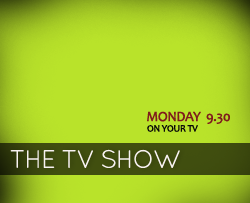
<style>
.page{position:relative;width:250px;height:203px;background:#b9e32a}
.page>*{position:absolute;margin:0}
.t1{font:14px "Candara";letter-spacing:-0.05em;color:#7f1b1b;font-weight:bold}
.t2{font:9.8px "Candara";letter-spacing:-0.05em;color:#090808;text-transform:uppercase;font-weight:bold}
.t3{font:25.3px "QuicksandBook-Regular";letter-spacing:-0.05em;color:#f8f2f2;text-transform:uppercase}
</style>
<div class="page">
<p class="t1" style="left:147px;top:111px;width:83px;height:13px">MONDAY  9.30</p>
<p class="t2" style="left:147px;top:125px;width:51px;height:7px">on your tv</p>
<p class="t3" style="left:10px;top:149px;width:170px;height:19px">THE TV SHOW</p>
</div>
